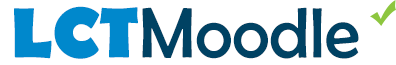
<style>
.page{position:relative;width:396px;height:65px;background:#ffffff}
.page>*{position:absolute;margin:0}
.t1{font:72px "BerlinSansFB-Reg";color:#004263}
.t2{font:72px "BerlinSansFB-Bold";color:#0088cc}
</style>
<div class="page">
<p class="t1" style="left:14px;top:6px;width:345px;height:53px"><span class="t2">LCT</span>Moodle</p>
<p class="t1" style="left:14px;top:6px;width:345px;height:53px"><span class="t2">LCT</span>Moodle</p>
</div>
